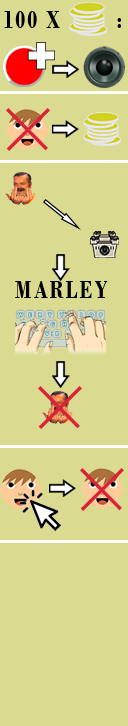
<style>
.page{position:relative;width:128px;height:726px;background:#dadb91}
.page>*{position:absolute;margin:0}
.t1{font:25px "BodoniMT-Bold";letter-spacing:0.1em;color:#000000;scale:0.8 1}
</style>
<div class="page">
<p class="t1" style="left:4px;top:11px;width:117px;height:17px">100 X        :</p>
<p class="t1" style="left:15px;top:281px;width:93px;height:17px">MARLEY</p>
</div>
